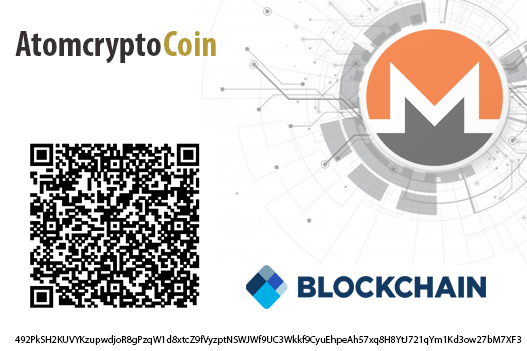
<style>
.page{position:relative;width:527px;height:351px;background:#ffffff}
.page>*{position:absolute;margin:0}
.t1{font:36px "MyriadPro-BoldCond";color:#363131}
.t2{font:36px "MyriadPro-BoldCond";color:#b49b35}
.t3{font:10px "MyriadPro-Regular";color:#000000}
</style>
<div class="page">
<p class="t1" style="left:15px;top:31px;width:146px;height:33px">Atomcrypto</p>
<p class="t2" style="left:164px;top:31px;width:52px;height:25px">Coin</p>
<p class="t3" style="left:15px;top:335px;width:507px;height:11px">492PkSH2KUVYKzupwdjoR8gPzqW1d8xtcZ9fVyzptNSWJWf9UC3Wkkf9CyuEhpeAh57xq8H8YtJ721qYm1Kd3ow27bM7XF3</p>
</div>
